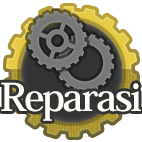
<style>
.page{position:relative;width:142px;height:142px;background:#ffffff}
.page>*{position:absolute;margin:0}
.t1{font:40px "HeiseiMinStd-W7";letter-spacing:-0.04em;color:#fffef9}
</style>
<div class="page">
<p class="t1" style="left:1px;top:82px;width:140px;height:39px">Reparasi</p>
</div>
